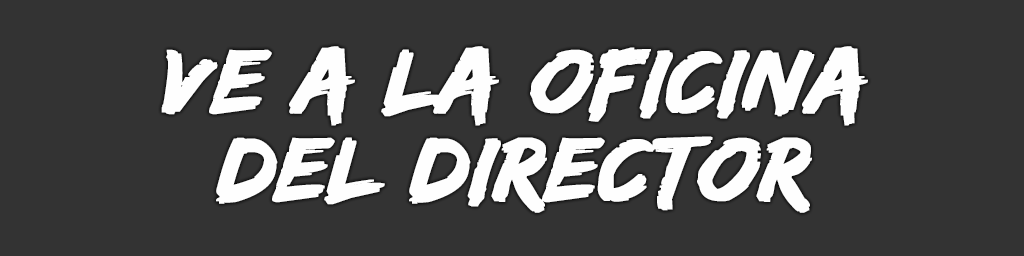
<style>
.page{position:relative;width:1024px;height:256px;background:#333333}
.page>*{position:absolute;margin:0}
.t1{font:94px/88px "EdoSZ";color:#fefefe;font-weight:bold;font-style:italic;scale:1.04 1}
</style>
<div class="page">
<p class="t1" style="left:161px;top:46px;width:707px;height:167px;text-align:center">Ve a LA OFICINA<br>DEL DIRECTOR</p>
</div>
